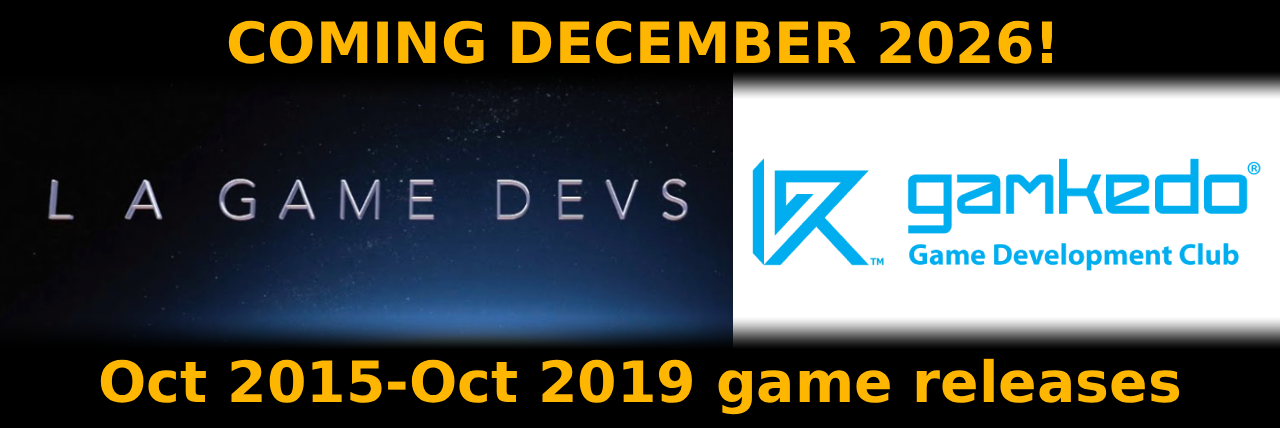
<style>
.page{position:relative;width:1280px;height:428px;background:#000000}
.page>*{position:absolute;margin:0}
.t1{font:56.8px "DejaVuSans-Bold";color:#ffb600}
</style>
<div class="page">
<p class="t1" style="left:228px;top:20px;width:824px;height:44px">COMING DECEMBER 2026!</p>
<p class="t1" style="left:100px;top:358px;width:1080px;height:57px">Oct 2015-Oct 2019 game releases</p>
</div>
